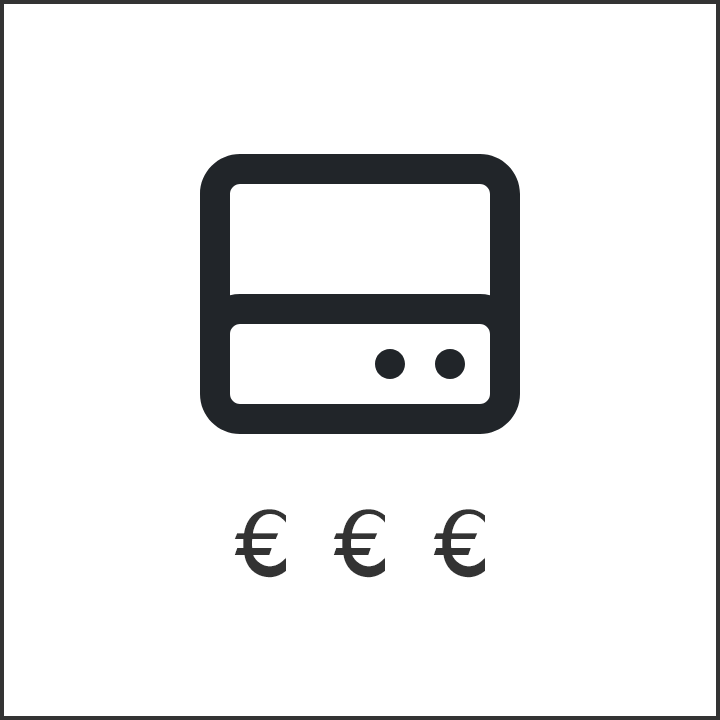
<style>
.page{position:relative;width:720px;height:720px;background:#ffffff}
.page>*{position:absolute;margin:0}
.t1{font:90px "OpenDyslexic-Regular";color:#333333}
</style>
<div class="page">
<p class="t1" style="left:234px;top:509px;width:251px;height:69px">€ € €</p>
</div>
